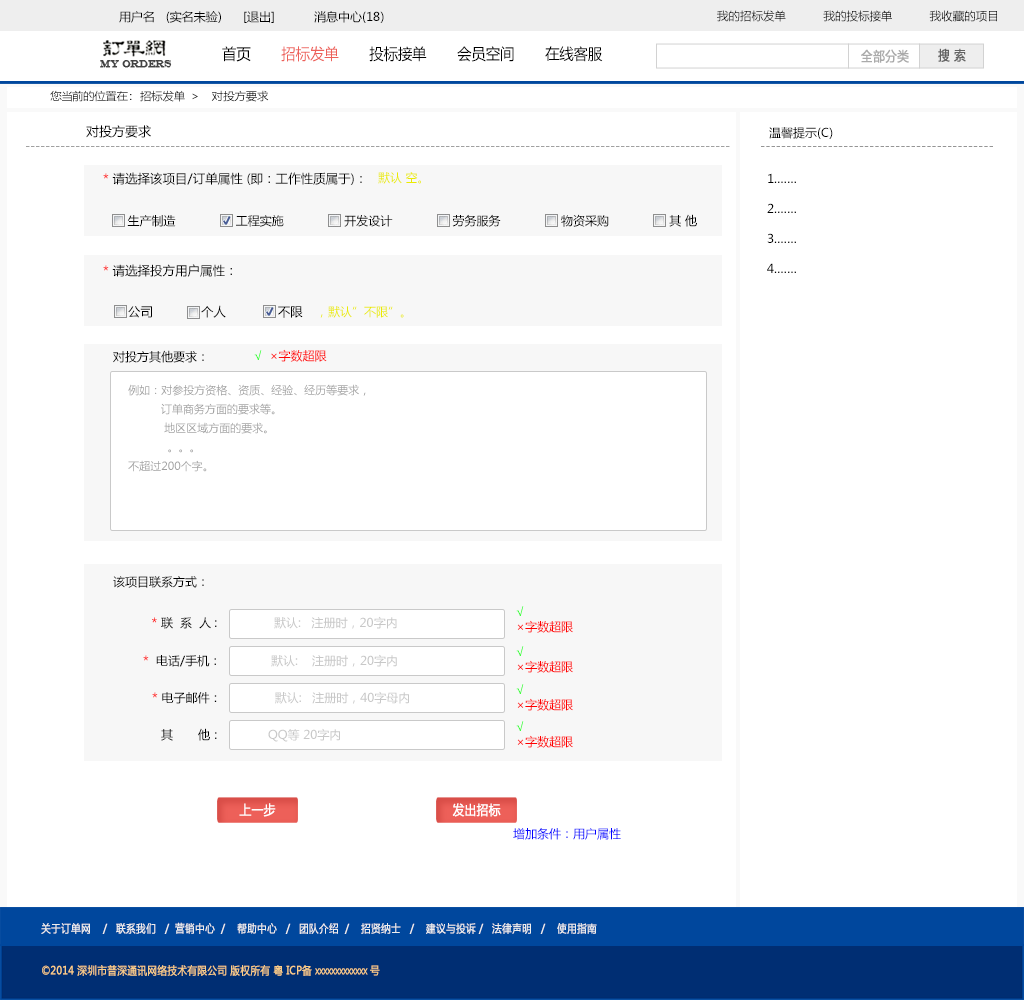
<style>
.page{position:relative;width:1024px;height:1000px;background:#ffffff}
.page>*{position:absolute;margin:0}
.t1{font:12px "MicrosoftYaHei";color:#000000}
.t2{font:11.5px "MicrosoftYaHei";color:#000000}
.t3{font:15.4px "MicrosoftYaHei";color:#000000;font-variant:small-caps;scale:0.94 1}
.t4{font:15.4px "MicrosoftYaHei";color:#ed6059;font-variant:small-caps;scale:0.94 1}
.t5{font:13.2px "MicrosoftYaHei";color:#aaaaaa;font-variant:small-caps;font-weight:bold;scale:0.86 1}
.t6{font:13.2px "MicrosoftYaHei";color:#626262;font-variant:small-caps;font-weight:bold;scale:0.86 1}
.t7{font:9.9px "EngraversMT";color:#434343;font-variant:small-caps;font-weight:bold;scale:0.86 1}
.t8{font:11px "MicrosoftYaHei";color:#060606;scale:1.04 1}
.t9{font:13px "MicrosoftYaHei";color:#000000}
.t10{font:12px "MicrosoftYaHei";color:#a0a0a0}
.t11{font:12px "MicrosoftYaHei";color:#959595}
.t12{font:12.5px "MicrosoftYaHei";color:#000000}
.t13{font:12.5px "MicrosoftYaHei";color:#ff0000}
.t14{font:12px "MicrosoftYaHei";color:#ebeb00}
.t15{font:12px/30px "MicrosoftYaHei";color:#000000}
.t16{font:13.5px "MicrosoftYaHei";color:#000000}
.t17{font:12px/45px "MicrosoftYaHei";color:#000000}
.t18{font:11.5px/30px "STXihei";color:#000000}
.t19{font:12px "MicrosoftYaHei";color:#ff0000}
.t20{font:11px/19px "MicrosoftYaHei";color:#a0a0a0}
.t21{font:12px/15px "MicrosoftYaHei";color:#ff0000}
.t22{font:12px/15px "MicrosoftYaHei";color:#00ff00}
.t23{font:12px "MicrosoftYaHei";color:#c8c8c8}
.t24{font:13.2px "MicrosoftYaHei";color:#ffffff;font-variant:small-caps;font-weight:bold;scale:0.86 1}
.t25{font:12px "MicrosoftYaHei";color:#0000ff}
.t26{font:11px "MicrosoftYaHei";color:#eeeeee;font-variant:small-caps;font-weight:bold;scale:0.86 1}
.t27{font:15.4px "STXihei";color:#eeeeee;font-variant:small-caps;font-weight:bold;scale:0.86 1}
.t28{font:11px "MicrosoftYaHei";color:#facd89;font-variant:small-caps;font-weight:bold;scale:0.87 1}
.t29{font:11px "MicrosoftYaHei";color:#eeeeee;font-variant:small-caps;font-weight:bold;scale:0.87 1}
</style>
<div class="page">
<p class="t1" style="left:119px;top:11px;width:265px;height:12px">用户名   (实名未验)      [退出]           消息中心(18)</p>
<p class="t2" style="left:717px;top:10px;width:280px;height:12px">我的招标发单           我的投标接单           我收藏的项目</p>
<p class="t3" style="left:222px;top:46px;width:381px;height:16px">首页       <span class="t4">招标发单 </span>      投标接单       会员空间       在线客服</p>
<p class="t5" style="left:861px;top:49px;width:48px;height:14px">全部分类</p>
<p class="t6" style="left:938px;top:48px;width:28px;height:14px">搜 索</p>
<p class="t7" style="left:100px;top:60px;width:72px;height:8px">MY ORDERS</p>
<p class="t8" style="left:50px;top:90px;width:219px;height:12px">您当前的位置在：  招标发单  &gt;    对投方要求</p>
<p class="t9" style="left:86px;top:125px;width:65px;height:13px">对投方要求</p>
<p class="t1" style="left:769px;top:127px;width:64px;height:12px">温馨提示(C)</p>
<p class="t10" style="left:26px;top:146px;width:704px;height:1px">---------------------------------------------------------------------------------------------------------------------------------------------</p>
<p class="t11" style="left:761px;top:146px;width:232px;height:1px">---------------------------------------------</p>
<p class="t12" style="left:103px;top:172px;width:259px;height:13px"><span class="t13">* </span>请选择该项目/订单属性 (即：工作性质属于)：</p>
<p class="t14" style="left:378px;top:172px;width:43px;height:12px">默认 空。</p>
<p class="t15" style="left:767px;top:173px;width:29px;height:100px">1.……<br>2.……<br>3.……<br>4.……</p>
<p class="t1" style="left:127px;top:214px;width:570px;height:13px"><span class="t16"><br></span>生产制造                 工程实施                 开发设计                 劳务服务                 物资采购                 其 他</p>
<p class="t12" style="left:103px;top:264px;width:129px;height:13px"><span class="t13">* </span>请选择投方用户属性：</p>
<p class="t12" style="left:128px;top:305px;width:175px;height:13px">公司             个人              不限</p>
<p class="t14" style="left:320px;top:306px;width:84px;height:12px">，默认”不限”。</p>
<p class="t17" style="left:113px;top:350px;width:91px;height:238px"><span class="t18"><br></span><br><br><br><br><br>对投方其他要求：<br><br><br><br><br>该项目联系方式：</p>
<p class="t19" style="left:254px;top:349px;width:73px;height:13px">√  ×字数超限</p>
<p class="t20" style="left:128px;top:384px;width:238px;height:88px">例如：对参投方资格、资质、经验、经历等要求，<br>          订单商务方面的要求等。<br>           地区区域方面的要求。<br>            。。。<br>不超过200个字。</p>
<p class="t21" style="left:516px;top:606px;width:57px;height:27px"><span class="t22">√<br></span>×字数超限</p>
<p class="t23" style="left:152px;top:616px;width:245px;height:13px"><span class="t1"> </span><span class="t13">* </span><span class="t1">联  系  人 :                </span>默认:   注册时，20字内</p>
<p class="t23" style="left:143px;top:654px;width:254px;height:13px"><span class="t13">*  </span><span class="t1">电话/手机：              </span>默认:    注册时，20字内</p>
<p class="t21" style="left:516px;top:646px;width:57px;height:27px"><span class="t22">√<br></span>×字数超限</p>
<p class="t21" style="left:516px;top:684px;width:57px;height:27px"><span class="t22">√<br></span>×字数超限</p>
<p class="t23" style="left:152px;top:691px;width:257px;height:13px"><span class="t13">* </span><span class="t1">电子邮件：               </span>默认:   注册时，40字母内</p>
<p class="t21" style="left:516px;top:721px;width:57px;height:27px"><span class="t22">√<br></span>×字数超限</p>
<p class="t1" style="left:161px;top:728px;width:179px;height:14px">其       他：             <span class="t23">QQ等 20字内</span></p>
<p class="t24" style="left:239px;top:803px;width:37px;height:14px">上一步</p>
<p class="t24" style="left:452px;top:803px;width:49px;height:14px">发出招标</p>
<p class="t25" style="left:513px;top:828px;width:108px;height:12px">增加条件：用户属性</p>
<p class="t26" style="left:41px;top:922px;width:556px;height:12px"><span class="t27"><br><br></span>关于订单网    /   联系我们   /  营销中心  /    帮助中心   /   团队介绍  /    招贤纳士   /    建议与投诉 /   法律声明   /    使用指南</p>
<p class="t28" style="left:42px;top:965px;width:338px;height:11px"><span class="t29"> </span>©2014 深圳市普深通讯网络技术有限公司 版权所有 粤 ICP备 xxxxxxxxxxxxx 号</p>
</div>
